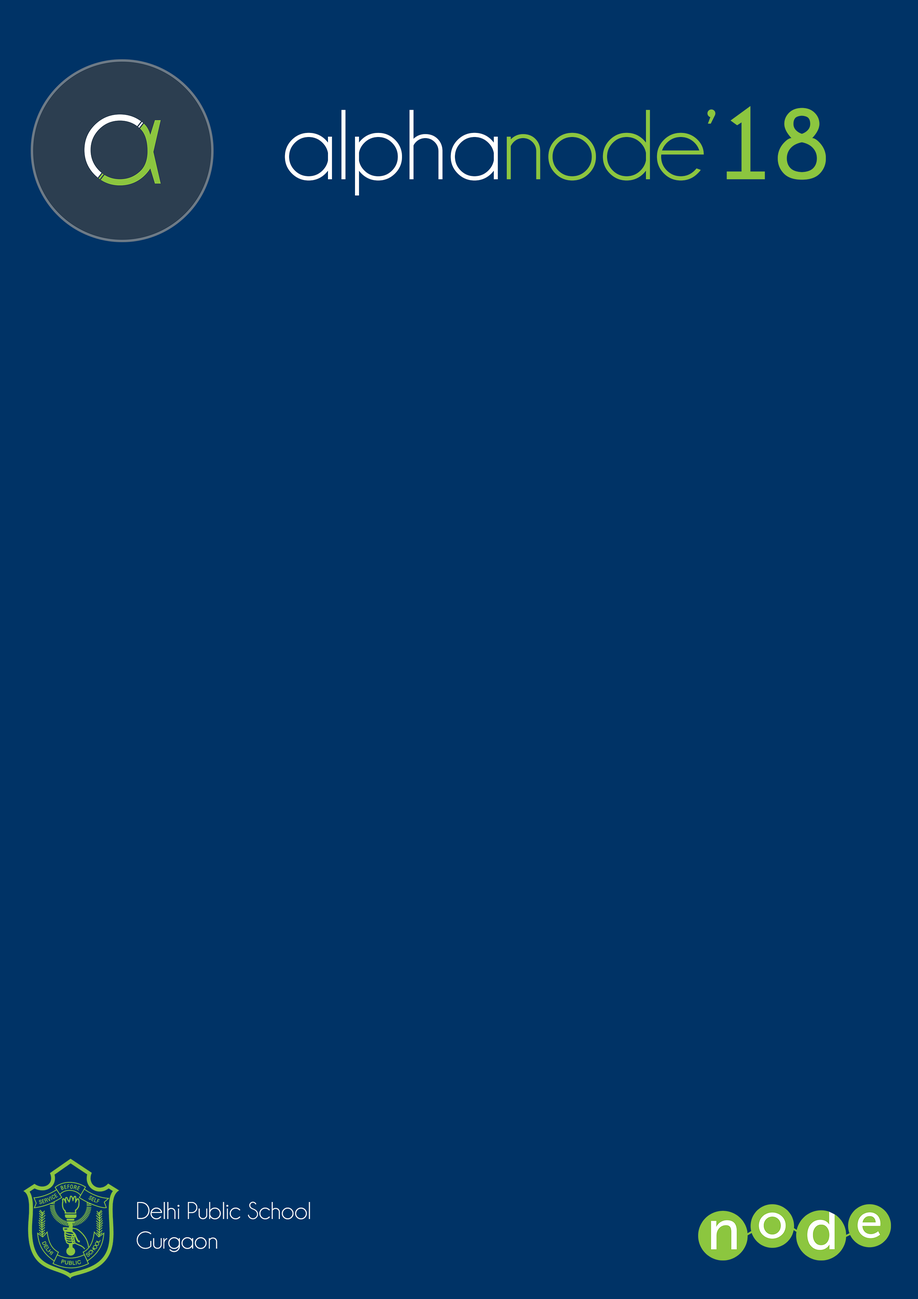
<style>
.page{position:relative;width:918px;height:1299px;background:#003366}
.page>*{position:absolute;margin:0}
.t1{font:100.2px "Champagne&Limousines";color:#ffffff}
.t2{font:100.2px "Champagne&Limousines";color:#8cc63f}
.t3{font:100.2px "Champagne&Limousines-Bold";color:#8cc63f}
.t4{font:24.7px "Champagne&Limousines";color:#ffffff}
</style>
<div class="page">
<p class="t1" style="left:285px;top:106px;width:541px;height:89px">alpha<span class="t2">node’</span><span class="t3">18</span></p>
<p class="t4" style="left:137px;top:1201px;width:173px;height:51px">Delhi Public School <br>Gurgaon</p>
</div>
